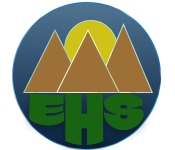
<style>
.page{position:relative;width:175px;height:150px;background:#ffffff}
.page>*{position:absolute;margin:0}
.t1{font:32.1px "ClimateCrisis-Regular";color:#196412;scale:1.23 1}
.t2{font:58.3px "ClimateCrisis-Regular";color:#196412;scale:0.66 1}
.t3{font:37.5px "ClimateCrisis-Regular";color:#196412}
</style>
<div class="page">
<p class="t1" style="left:29px;top:93px;width:36px;height:33px;rotate:3deg">E</p>
<p class="t2" style="left:65px;top:93px;width:39px;height:53px">H</p>
<p class="t3" style="left:103px;top:93px;width:41px;height:38px">S</p>
</div>
